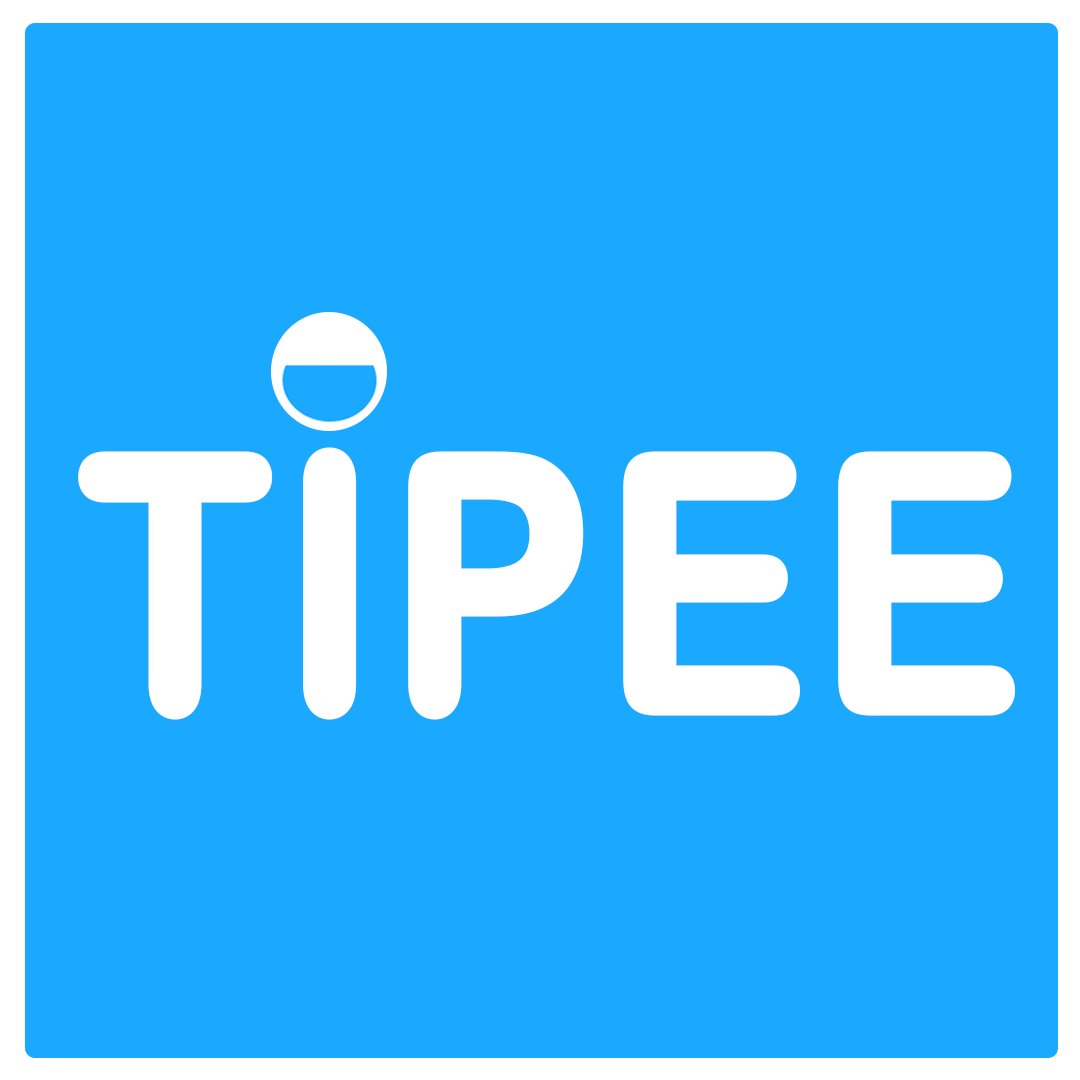
<style>
.page{position:relative;width:1080px;height:1080px;background:#1ba9ff}
.page>*{position:absolute;margin:0}
.t1{font:355.5px "ArialRoundedMTBold";letter-spacing:0.012em;color:#ffffff;font-weight:bold;scale:0.86 1}
</style>
<div class="page">
<p class="t1" style="left:78px;top:447px;width:937px;height:273px">TIPEE</p>
</div>
